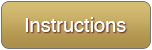
<style>
.page{position:relative;width:152px;height:50px}
.page>*{position:absolute;margin:0}
.t1{font:20px "Helvetica";color:#ffffff}
</style>
<div class="page">
<p class="t1" style="left:25px;top:17px;width:101px;height:15px">Instructions</p>
</div>
